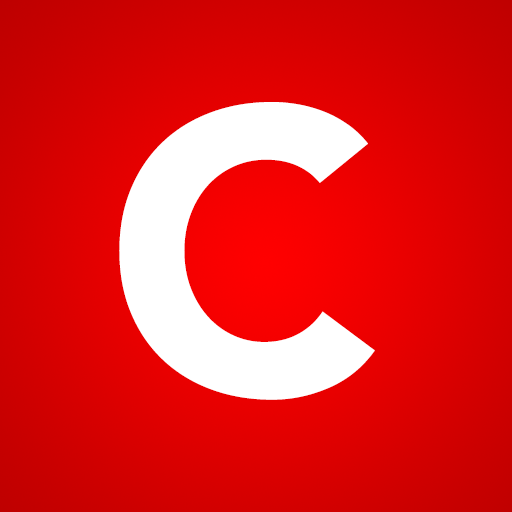
<style>
.page{position:relative;width:512px;height:512px}
.page>*{position:absolute;margin:0}
.t1{font:399.7px "Avenir-Black";color:#ffffff}
</style>
<div class="page">
<p class="t1" style="left:119px;top:102px;width:256px;height:298px">C</p>
</div>
